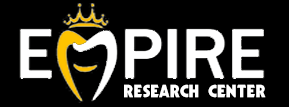
<style>
.page{position:relative;width:289px;height:107px;background:#000000}
.page>*{position:absolute;margin:0}
.t1{font:15.7px "NHLToronto";color:#ffffff;scale:1.09 1}
</style>
<div class="page">
<p class="t1" style="left:124px;top:84px;width:142px;height:14px">Research Center</p>
</div>
